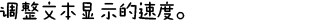
<style>
.page{position:relative;width:327px;height:21px;background:#ffffff}
.page>*{position:absolute;margin:0}
.t1{font:22px "¢è?";color:#000000}
</style>
<div class="page">
<p class="t1" style="left:0px;top:1px;width:185px;height:19px">调整文本显示的速度。</p>
</div>
